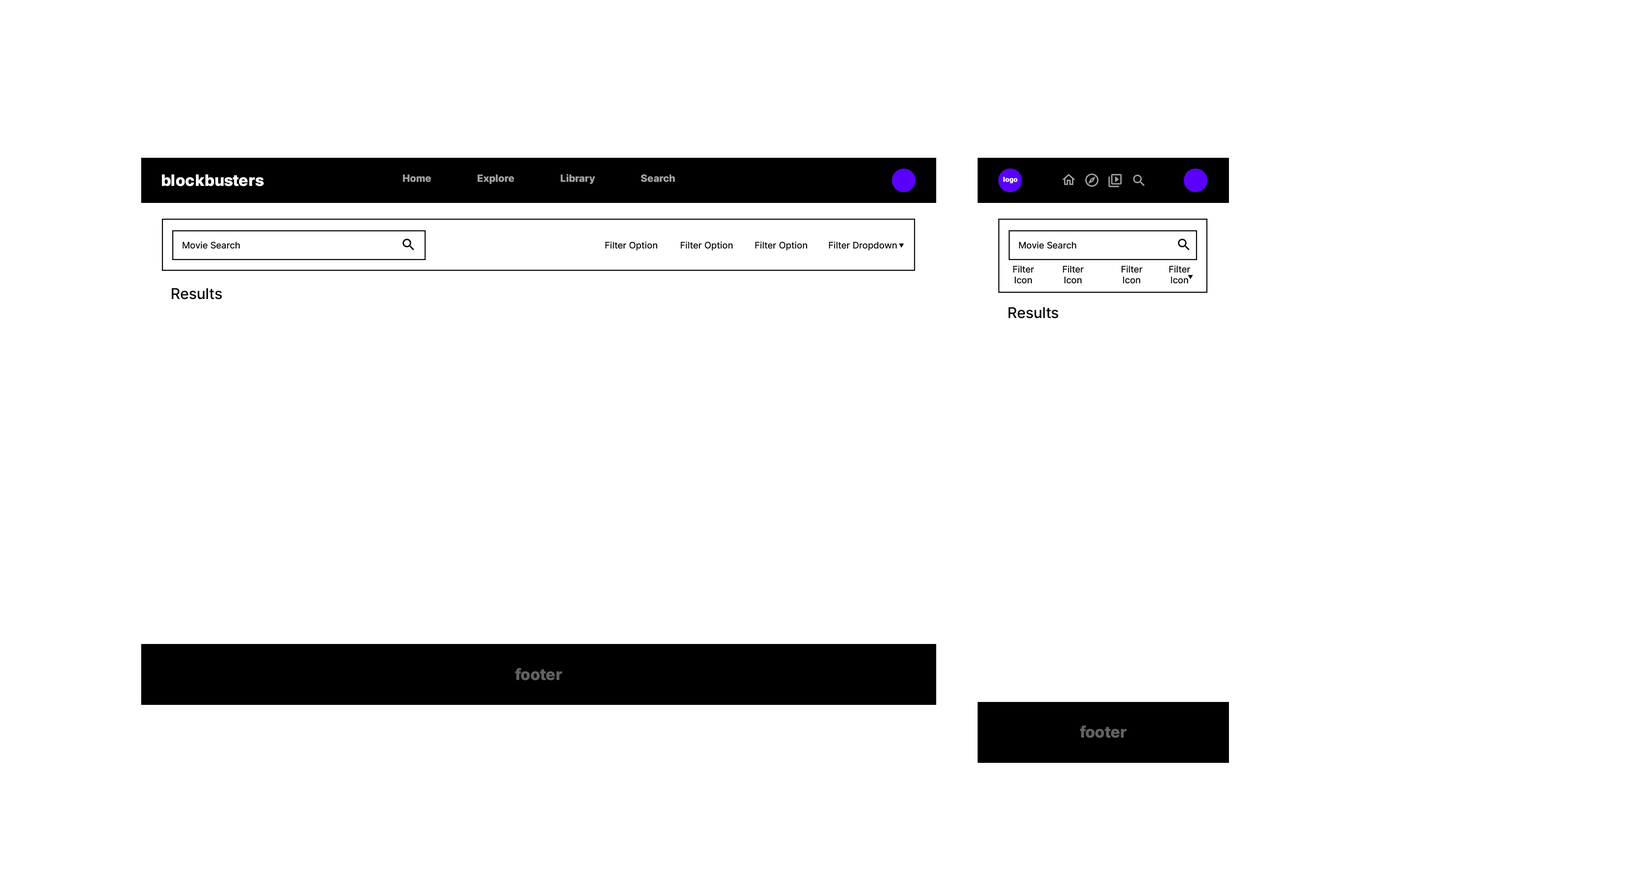
<style>
.page{position:relative;width:1643px;height:873px;background:#ffffff}
.page>*{position:absolute;margin:0}
.t1{font:9.9px "Inter-ExtraBold";color:#a2a2a2}
.t2{font:15.5px "Inter-ExtraBold";color:#ffffff}
.t3{font:6.6px "Inter-ExtraBold";color:#ffffff}
.t4{font:9px "Inter-Medium";color:#000000}
.t5{font:14.9px "Inter-Medium";color:#000000}
.t6{font:15.5px "Inter-ExtraBold";color:#626262}
</style>
<div class="page">
<p class="t1" style="left:403px;top:174px;width:272px;height:10px">Home Explore Library Search</p>
<p class="t2" style="left:162px;top:174px;width:102px;height:12px">blockbusters</p>
<p class="t3" style="left:1003px;top:177px;width:14px;height:6px">logo</p>
<p class="t4" style="left:183px;top:241px;width:57px;height:8px">Movie Search</p>
<p class="t4" style="left:605px;top:241px;width:52px;height:9px">Filter Option</p>
<p class="t4" style="left:681px;top:241px;width:52px;height:9px">Filter Option</p>
<p class="t4" style="left:755px;top:241px;width:52px;height:9px">Filter Option</p>
<p class="t4" style="left:829px;top:241px;width:68px;height:9px">Filter Dropdown</p>
<p class="t4" style="left:1019px;top:241px;width:57px;height:8px">Movie Search</p>
<p class="t4" style="left:1013px;top:265px;width:21px;height:19px;text-align:center">Filter<br>Icon</p>
<p class="t4" style="left:1063px;top:265px;width:20px;height:19px;text-align:center">Filter<br>Icon</p>
<p class="t4" style="left:1121px;top:265px;width:21px;height:19px;text-align:center">Filter<br>Icon</p>
<p class="t4" style="left:1169px;top:265px;width:21px;height:19px;text-align:center">Filter<br>Icon</p>
<p class="t5" style="left:171px;top:288px;width:51px;height:11px">Results</p>
<p class="t5" style="left:1008px;top:307px;width:50px;height:11px">Results</p>
<p class="t6" style="left:515px;top:668px;width:47px;height:12px">footer</p>
<p class="t6" style="left:1080px;top:725px;width:46px;height:13px">footer</p>
</div>
